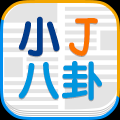
<style>
.page{position:relative;width:120px;height:120px;background:#e4e4e4}
.page>*{position:absolute;margin:0}
.t1{font:41.7px "STYuanti-SC-Bold";letter-spacing:0.05em;color:#003c8c;font-weight:bold}
.t2{font:47px "ComicSansMS";letter-spacing:0.05em;color:#fc7300;font-weight:bold}
.t3{font:39.9px "STYuanti-SC-Bold";color:#0096df;font-weight:bold}
</style>
<div class="page">
<p class="t1" style="left:18px;top:16px;width:80px;height:41px">小<span class="t2">J</span></p>
<p class="t3" style="left:18px;top:61px;width:84px;height:40px">八卦</p>
</div>
